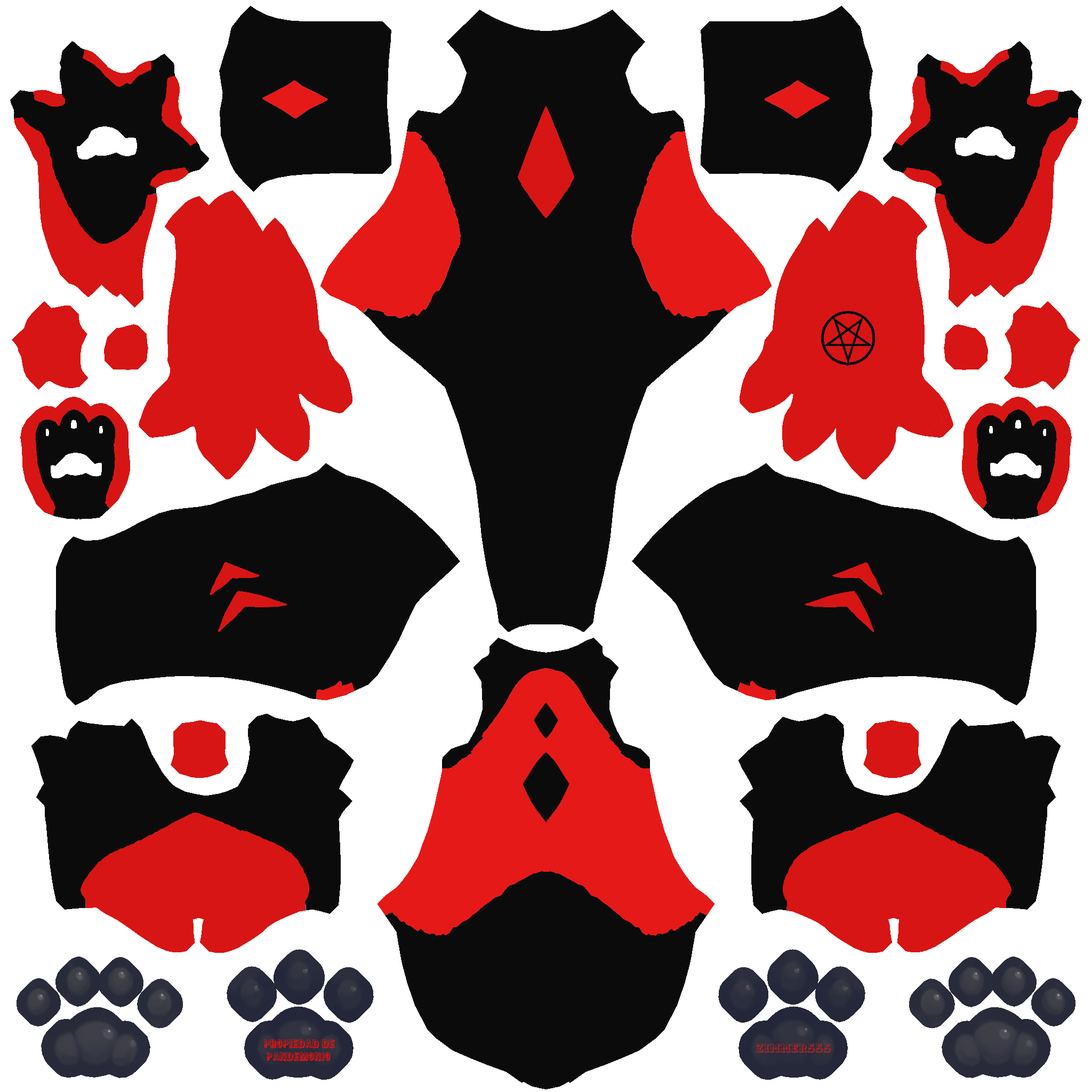
<style>
.page{position:relative;width:1092px;height:1092px;background:#0b0b0b}
.page>*{position:absolute;margin:0}
.t1{font:10.7px "District";color:#d71515}
</style>
<div class="page">
<p class="t1" style="left:263px;top:1039px;width:72px;height:23px">Propiedad de<br> Pandemonio</p>
</div>
